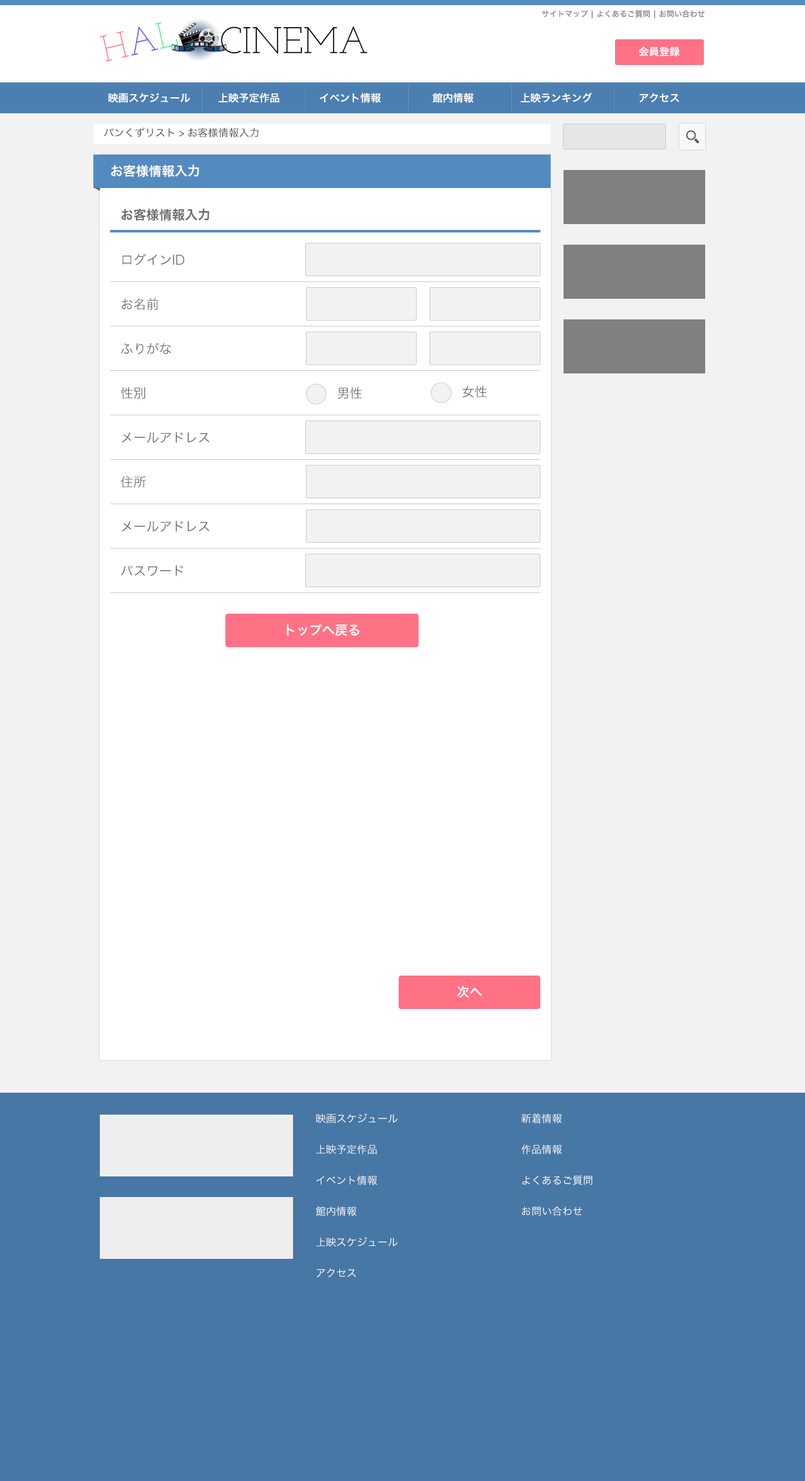
<style>
.page{position:relative;width:805px;height:1481px;background:#f2f2f2}
.page>*{position:absolute;margin:0}
.t1{font:7.7px "HiraKakuProN-W6";color:#888888}
.t2{font:10.3px "HiraKakuProN-W6";color:#ffffff}
.t3{font:10.3px "HiraKakuProN-W3";color:#333333}
.t4{font:12.9px "HiraKakuProN-W6";color:#ffffff}
.t5{font:12.9px "HiraKakuProN-W6";color:#666666}
.t6{font:12.9px "HiraKakuProN-W3";color:#666666}
.t7{font:10.3px/15.5px "HiraKakuProN-W3";color:#ffffff}
</style>
<div class="page">
<p class="t1" style="left:542px;top:10px;width:163px;height:9px">サイトマップ | よくあるご質問 | お問い合わせ</p>
<p class="t2" style="left:639px;top:46px;width:41px;height:11px">会員登録</p>
<p class="t2" style="left:108px;top:93px;width:82px;height:10px">映画スケジュール</p>
<p class="t2" style="left:218px;top:93px;width:62px;height:10px">上映予定作品</p>
<p class="t2" style="left:319px;top:93px;width:62px;height:10px">イベント情報</p>
<p class="t2" style="left:432px;top:93px;width:42px;height:10px">館内情報</p>
<p class="t2" style="left:520px;top:93px;width:72px;height:10px">上映ランキング</p>
<p class="t2" style="left:640px;top:93px;width:39px;height:9px">アクセス</p>
<p class="t3" style="left:104px;top:128px;width:154px;height:10px">パンくずリスト &gt; お客様情報入力</p>
<p class="t4" style="left:111px;top:165px;width:88px;height:12px">お客様情報入力</p>
<p class="t5" style="left:121px;top:209px;width:88px;height:12px">お客様情報入力</p>
<p class="t6" style="left:122px;top:254px;width:62px;height:11px">ログインID</p>
<p class="t6" style="left:122px;top:298px;width:36px;height:12px">お名前</p>
<p class="t6" style="left:121px;top:343px;width:50px;height:11px">ふりがな</p>
<p class="t6" style="left:120px;top:387px;width:26px;height:12px">性別</p>
<p class="t6" style="left:337px;top:387px;width:25px;height:12px">男性</p>
<p class="t6" style="left:462px;top:386px;width:25px;height:12px">女性</p>
<p class="t6" style="left:122px;top:432px;width:87px;height:11px">メールアドレス</p>
<p class="t6" style="left:120px;top:476px;width:26px;height:12px">住所</p>
<p class="t6" style="left:122px;top:521px;width:87px;height:11px">メールアドレス</p>
<p class="t6" style="left:121px;top:565px;width:63px;height:11px">パスワード</p>
<p class="t4" style="left:287px;top:624px;width:72px;height:12px">トップへ戻る</p>
<p class="t4" style="left:457px;top:986px;width:25px;height:12px">次へ</p>
<p class="t7" style="left:316px;top:1114px;width:82px;height:164px">映画スケジュール<br><br>上映予定作品<br><br>イベント情報<br><br>館内情報<br><br>上映スケジュール<br><br>アクセス</p>
<p class="t7" style="left:521px;top:1114px;width:71px;height:102px">新着情報<br><br>作品情報<br><br>よくあるご質問<br><br>お問い合わせ</p>
</div>
